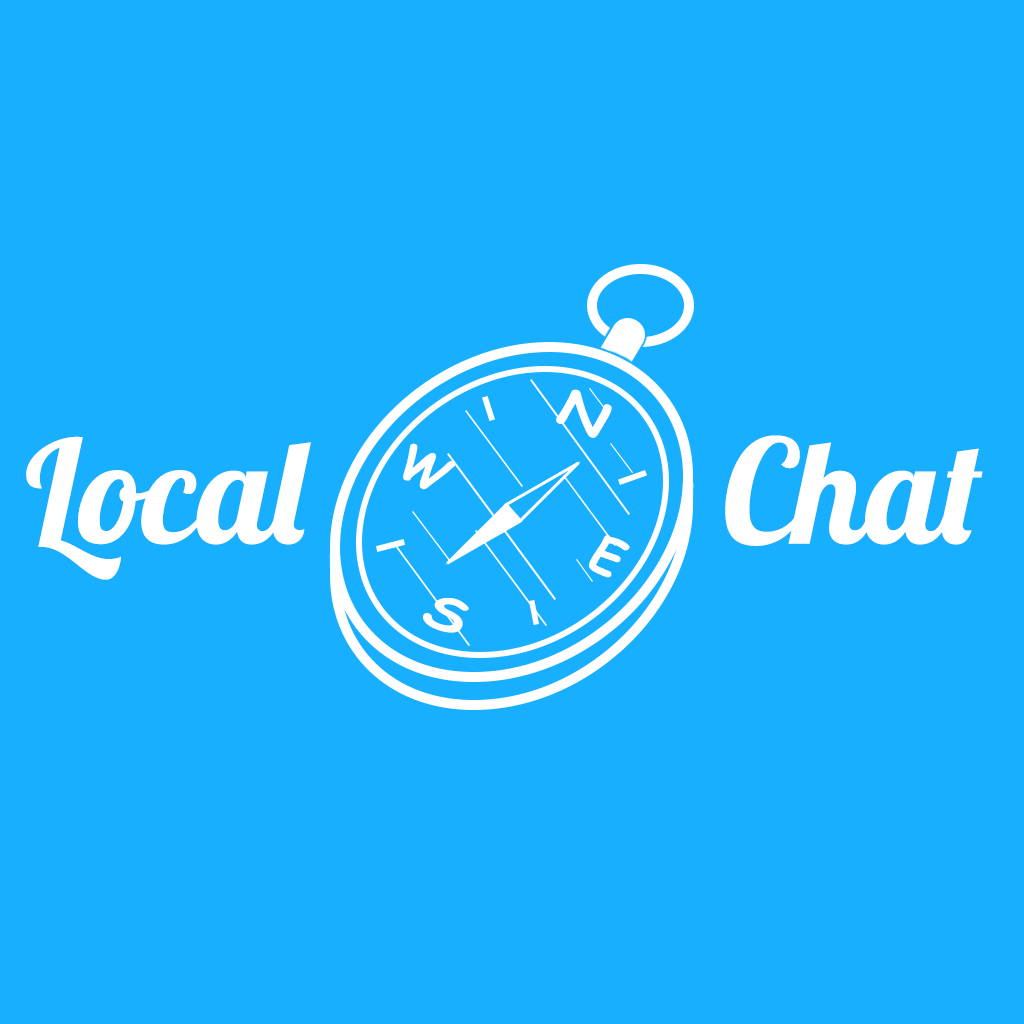
<style>
.page{position:relative;width:1024px;height:1024px;background:#19afff}
.page>*{position:absolute;margin:0}
.t1{font:48px "ComicSansMS-Bold";color:#ffffff;scale:1.26 1}
.t2{font:144px "Lobster1.4";color:#ffffff}
.t3{font:47.8px "ComicSansMS-Bold";color:#ffffff}
</style>
<div class="page">
<p class="t1" style="left:556px;top:389px;width:56px;height:49px;rotate:25deg">N</p>
<p class="t2" style="left:26px;top:436px;width:285px;height:144px">Local</p>
<p class="t2" style="left:725px;top:435px;width:258px;height:111px">Chat</p>
<p class="t3" style="left:403px;top:443px;width:52px;height:47px;rotate:25deg">W</p>
<p class="t3" style="left:589px;top:535px;width:41px;height:43px;rotate:25deg">E</p>
<p class="t1" style="left:423px;top:598px;width:46px;height:35px;rotate:25deg">S</p>
</div>
